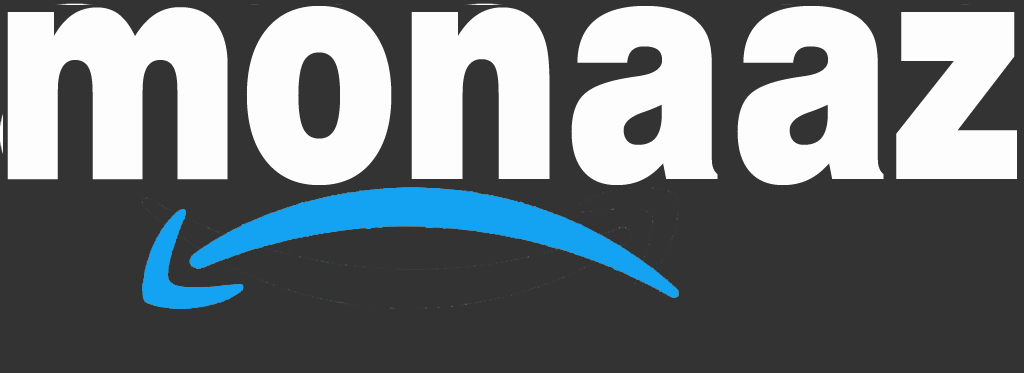
<style>
.page{position:relative;width:1024px;height:373px;background:#333333}
.page>*{position:absolute;margin:0}
.t1{font:314.5px "Swiss721BT-Black";color:#fdfdfd;scale:0.76 1}
</style>
<div class="page">
<p class="t1" style="left:7px;top:6px;width:1010px;height:179px">monaaz</p>
</div>
